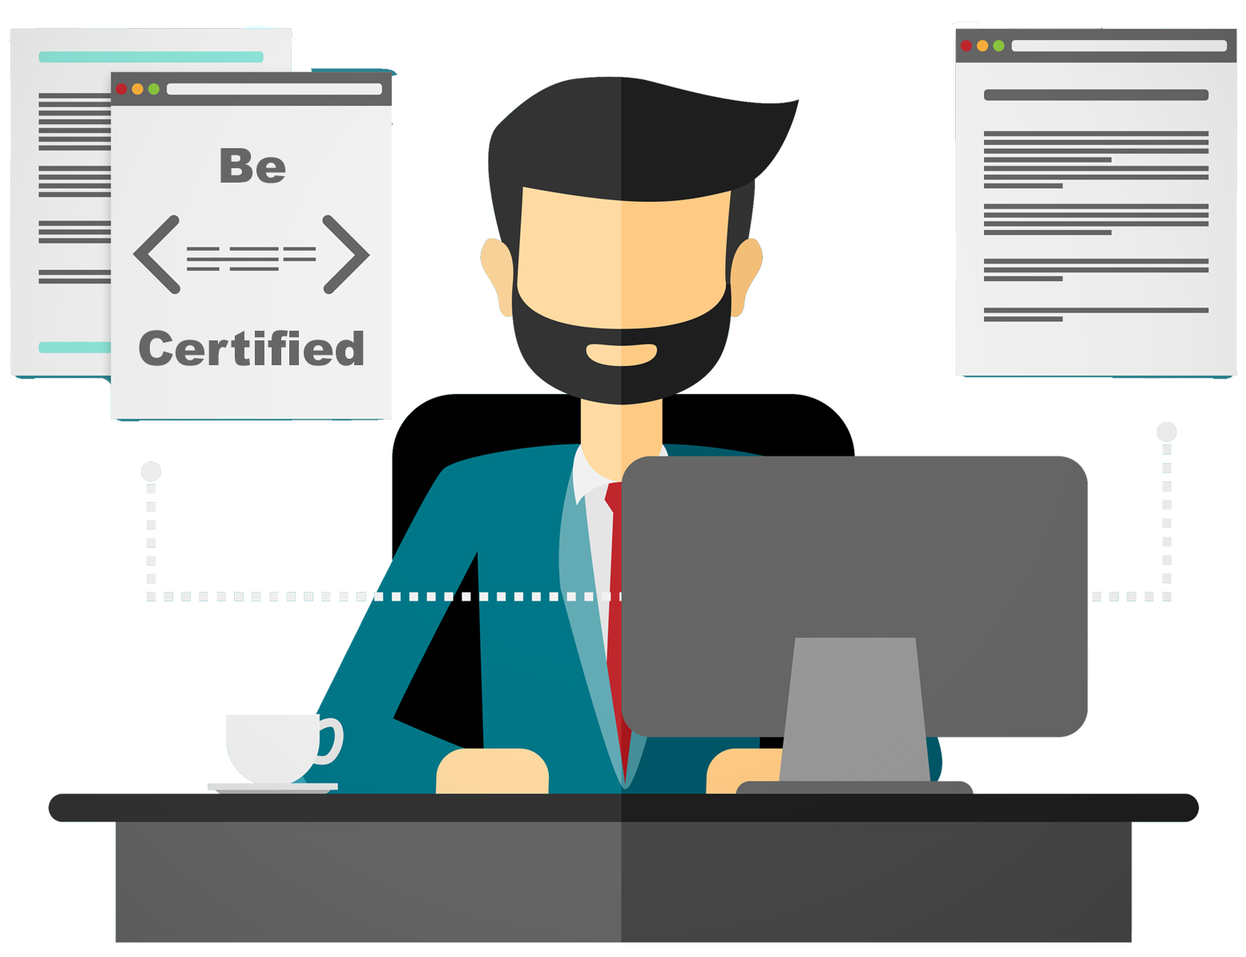
<style>
.page{position:relative;width:1246px;height:957px;background:#ffffff}
.page>*{position:absolute;margin:0}
.t1{font:48.1px "Arial-Black";color:#666666}
</style>
<div class="page">
<p class="t1" style="left:220px;top:148px;width:66px;height:35px">Be</p>
<p class="t1" style="left:139px;top:330px;width:225px;height:36px">Certified</p>
</div>
